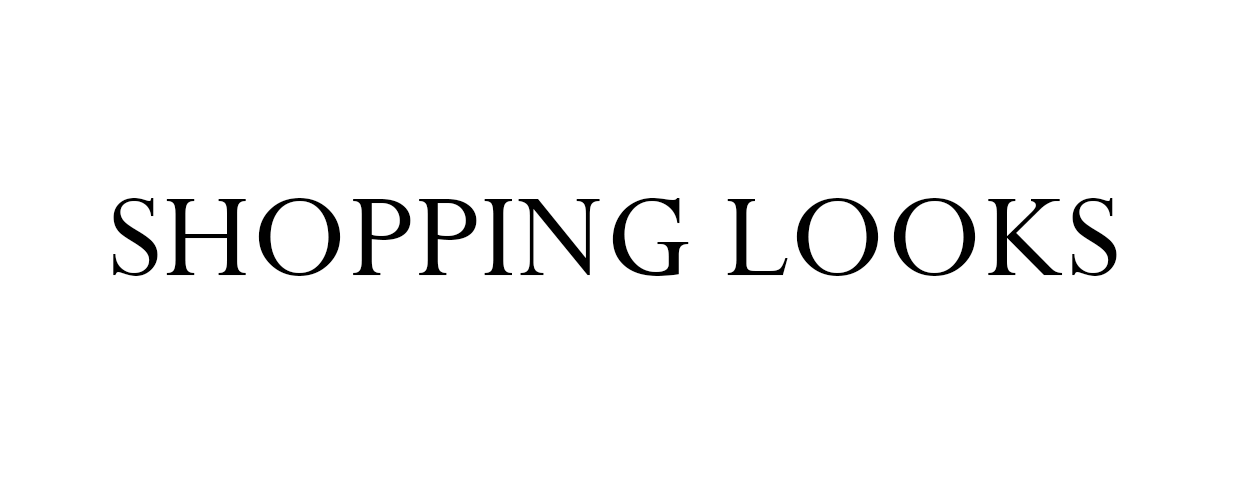
<style>
.page{position:relative;width:1250px;height:500px;background:#ffffff}
.page>*{position:absolute;margin:0}
.t1{font:133.3px "Perpetua";color:#000000;text-transform:uppercase}
</style>
<div class="page">
<p class="t1" style="left:113px;top:198px;width:1004px;height:78px">Shopping Looks</p>
</div>
